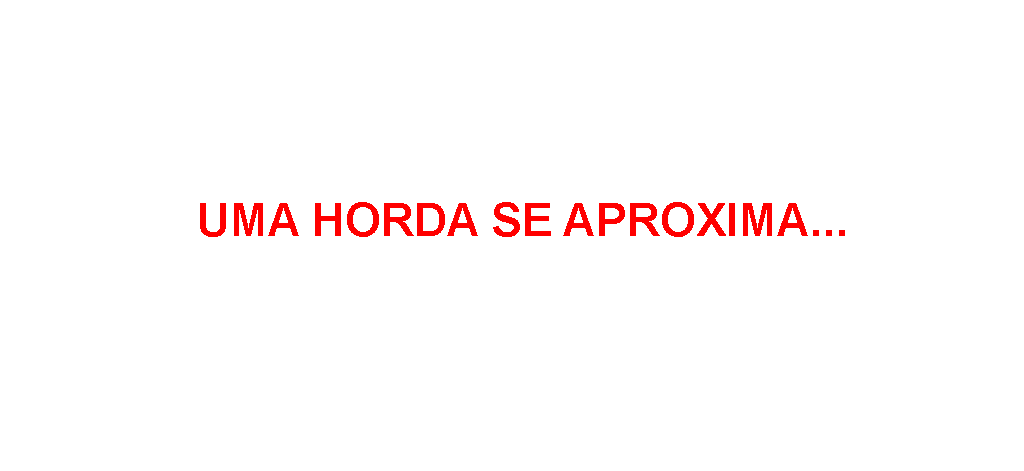
<style>
.page{position:relative;width:1024px;height:471px;background:#ffffff}
.page>*{position:absolute;margin:0}
.t1{font:45.8px "Arial-BoldMT";color:#ff0000}
</style>
<div class="page">
<p class="t1" style="left:200px;top:202px;width:645px;height:35px">UMA HORDA SE APROXIMA...</p>
</div>
